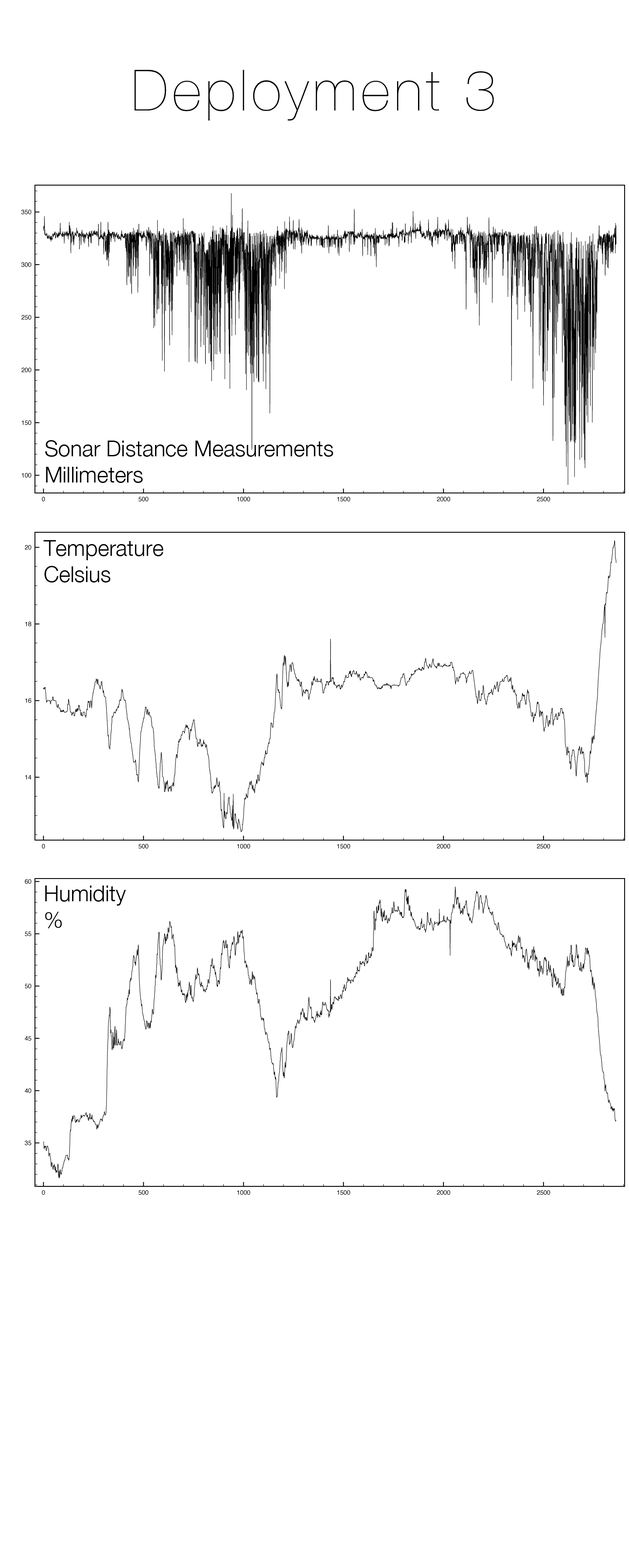
<style>
.page{position:relative;width:629px;height:1568px;background:#ffffff}
.page>*{position:absolute;margin:0}
.t1{font:56.8px "HelveticaNeue-UltraLight";letter-spacing:0.075em;color:#000000}
.t2{font:21.8px "HelveticaNeue-Light";color:#000000}
</style>
<div class="page">
<p class="t1" style="left:134px;top:70px;width:360px;height:51px">Deployment 3</p>
<p class="t2" style="left:45px;top:440px;width:288px;height:43px">Sonar Distance Measurements<br>Millimeters</p>
<p class="t2" style="left:43px;top:540px;width:120px;height:42px">Temperature<br>Celsius</p>
<p class="t2" style="left:45px;top:886px;width:81px;height:42px">Humidity<br>%</p>
</div>
